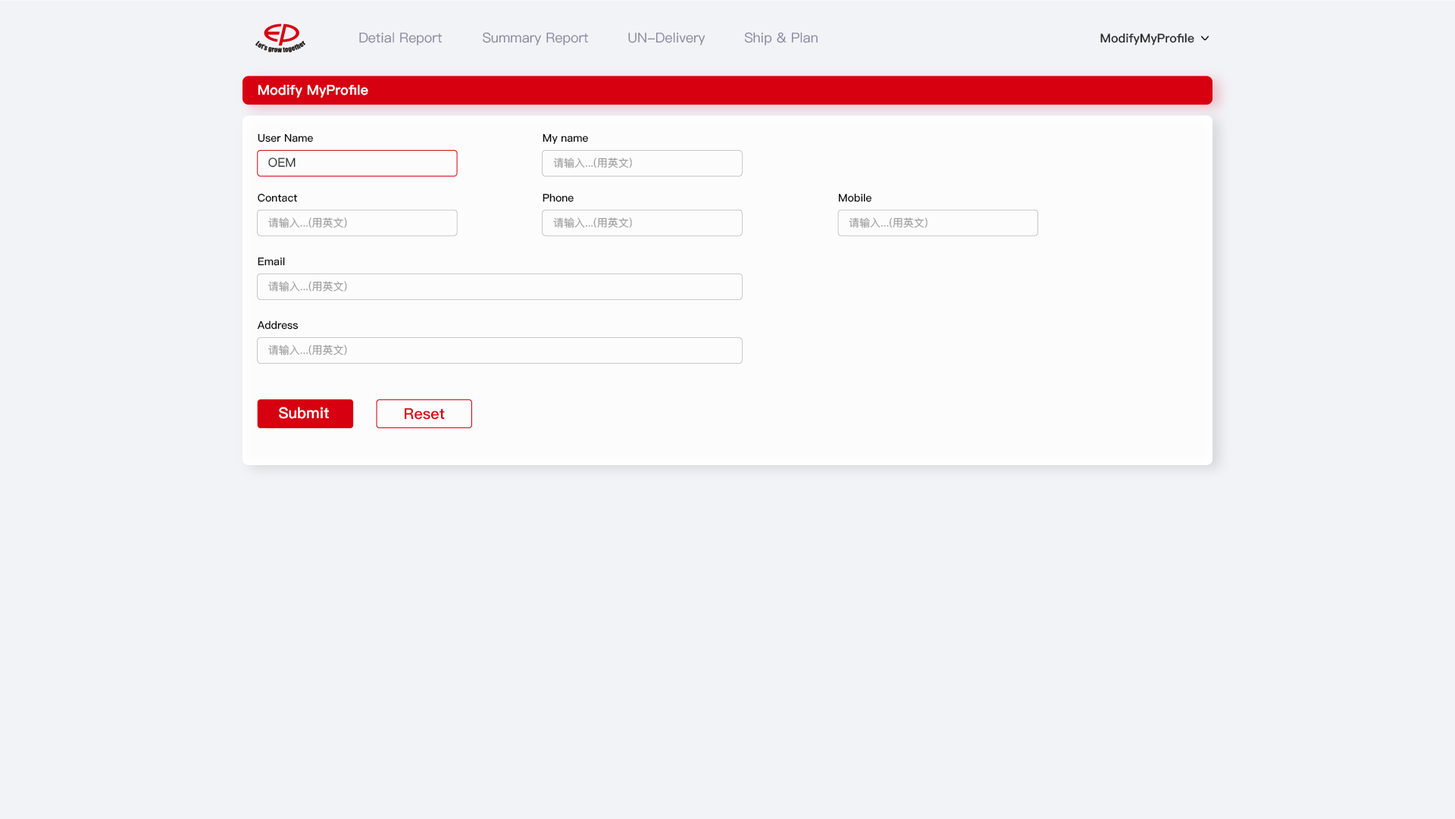
<style>
.page{position:relative;width:1455px;height:819px;background:#f2f3f7}
.page>*{position:absolute;margin:0}
.t1{font:13.6px "PingFang-SC-Medium";color:#87889e}
.t2{font:12.1px "PingFang-SC-Heavy";color:#2b2d2d}
.t3{font:13.6px "PingFang-SC-Heavy";color:#ffffff}
.t4{font:10.6px "PingFang-SC-Bold";color:#0b0a0a}
.t5{font:12.1px "PingFang-SC-Medium";color:#2b2d2d}
.t6{font:10.6px "PingFang-SC-Medium";color:#9b9b9b}
.t7{font:15.2px "PingFang-SC-Heavy";color:#ffffff}
.t8{font:15.2px "PingFang-SC-Heavy";color:#d60010}
</style>
<div class="page">
<p class="t1" style="left:359px;top:33px;width:84px;height:12px">Detial Report</p>
<p class="t1" style="left:483px;top:32px;width:106px;height:13px">Summary Report</p>
<p class="t1" style="left:628px;top:32px;width:78px;height:13px">UN-Delivery</p>
<p class="t1" style="left:744px;top:32px;width:74px;height:13px">Ship &amp; Plan</p>
<p class="t2" style="left:1101px;top:33px;width:94px;height:12px">ModifyMyProfile</p>
<p class="t3" style="left:258px;top:84px;width:110px;height:14px">Modify MyProfile</p>
<p class="t4" style="left:258px;top:133px;width:55px;height:9px">User Name</p>
<p class="t4" style="left:543px;top:133px;width:45px;height:11px">My name</p>
<p class="t5" style="left:268px;top:158px;width:28px;height:10px">OEM</p>
<p class="t6" style="left:553px;top:158px;width:79px;height:10px">请输入...(用英文)</p>
<p class="t4" style="left:258px;top:193px;width:40px;height:9px">Contact</p>
<p class="t4" style="left:543px;top:193px;width:31px;height:9px">Phone</p>
<p class="t4" style="left:838px;top:193px;width:34px;height:9px">Mobile</p>
<p class="t6" style="left:268px;top:218px;width:79px;height:10px">请输入...(用英文)</p>
<p class="t6" style="left:553px;top:218px;width:79px;height:10px">请输入...(用英文)</p>
<p class="t6" style="left:849px;top:218px;width:79px;height:10px">请输入...(用英文)</p>
<p class="t4" style="left:258px;top:257px;width:27px;height:9px">Email</p>
<p class="t6" style="left:268px;top:281px;width:79px;height:11px">请输入...(用英文)</p>
<p class="t4" style="left:257px;top:321px;width:42px;height:9px">Address</p>
<p class="t6" style="left:268px;top:345px;width:79px;height:10px">请输入...(用英文)</p>
<p class="t7" style="left:279px;top:407px;width:50px;height:12px">Submit</p>
<p class="t8" style="left:405px;top:408px;width:40px;height:12px">Reset</p>
</div>
